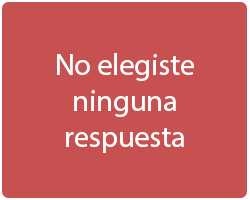
<style>
.page{position:relative;width:250px;height:200px;background:#c65150}
.page>*{position:absolute;margin:0}
.t1{font:30px "MyriadHebrew-Regular";color:#ffffff}
</style>
<div class="page">
<p class="t1" style="left:57px;top:53px;width:137px;height:100px;text-align:center">No elegiste <br>ninguna respuesta</p>
</div>
